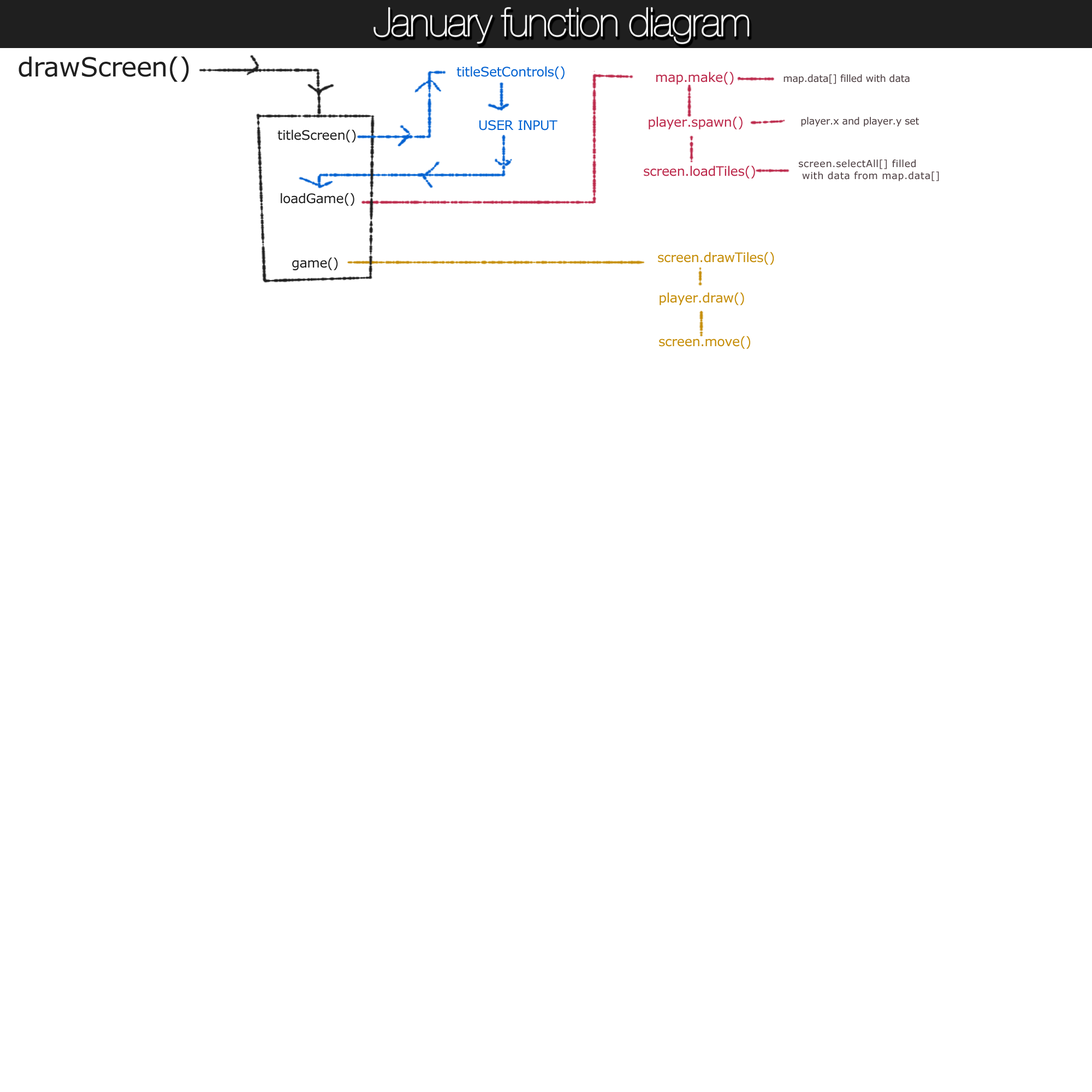
<style>
.page{position:relative;width:1092px;height:1092px;background:#ffffff}
.page>*{position:absolute;margin:0}
.t1{font:26.2px "Verdana";letter-spacing:-0.02em;color:#1f1f1f}
.t2{font:13.1px "Verdana";letter-spacing:-0.02em;color:#0061d1}
.t3{font:13.1px "Verdana";letter-spacing:-0.02em;color:#bc294b}
.t4{font:9.8px "Verdana";letter-spacing:-0.02em;color:#4e4043}
.t5{font:13.1px "Verdana";letter-spacing:-0.02em;color:#1f1f1f}
.t6{font:9.8px "Verdana";letter-spacing:0.025em;color:#4e4043}
.t7{font:13.1px "Verdana";letter-spacing:-0.02em;color:#c58d07}
</style>
<div class="page">
<p class="t1" style="left:19px;top:56px;width:170px;height:26px">drawScreen()</p>
<p class="t2" style="left:456px;top:66px;width:109px;height:13px">titleSetControls()</p>
<p class="t3" style="left:656px;top:72px;width:78px;height:13px">map.make()</p>
<p class="t4" style="left:783px;top:74px;width:127px;height:10px">map.data[] filled with data</p>
<p class="t2" style="left:479px;top:120px;width:78px;height:10px">USER INPUT</p>
<p class="t3" style="left:649px;top:116px;width:94px;height:13px">player.spawn()</p>
<p class="t4" style="left:801px;top:117px;width:118px;height:10px">player.x and player.y set</p>
<p class="t5" style="left:277px;top:129px;width:79px;height:14px">titleScreen()</p>
<p class="t6" style="left:799px;top:159px;width:140px;height:22px">screen.selectAll[] filled<br> with data from map.data[]</p>
<p class="t3" style="left:644px;top:165px;width:111px;height:14px">screen.loadTiles()</p>
<p class="t5" style="left:281px;top:193px;width:73px;height:13px">loadGame()</p>
<p class="t5" style="left:292px;top:257px;width:46px;height:13px">game()</p>
<p class="t7" style="left:658px;top:252px;width:116px;height:13px">screen.drawTiles()</p>
<p class="t7" style="left:660px;top:292px;width:84px;height:13px">player.draw()</p>
<p class="t7" style="left:659px;top:336px;width:91px;height:13px">screen.move()</p>
</div>
